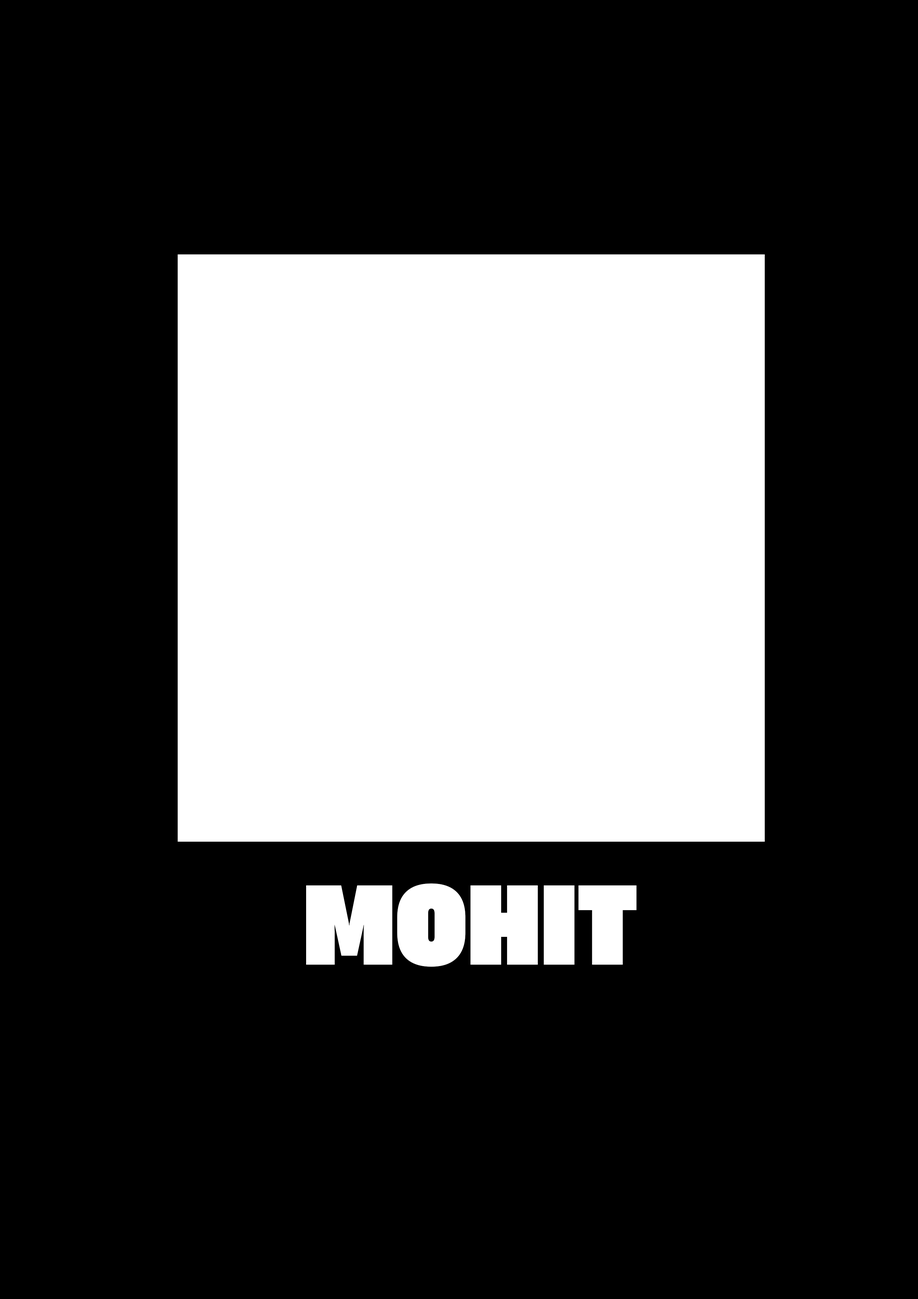
<style>
.page{position:relative;width:918px;height:1299px;background:#000000}
.page>*{position:absolute;margin:0}
.t1{font:106.4px "HeadingNowTrial-68Heavy";color:#ffffff}
</style>
<div class="page">
<p class="t1" style="left:306px;top:883px;width:331px;height:84px">MOHIT</p>
</div>
